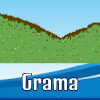
<style>
.page{position:relative;width:100px;height:100px;background:#6aa84f}
.page>*{position:absolute;margin:0}
.t1{font:20px "DenkOne-Regular";color:#ffffff}
</style>
<div class="page">
<p class="t1" style="left:22px;top:73px;width:56px;height:18px">Grama</p>
</div>
